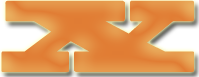
<style>
.page{position:relative;width:199px;height:77px}
.page>*{position:absolute;margin:0}
.t1{font:133.3px "BlackoakStd";color:#e38a40}
.t2{font:242.2px "BlackoakStd";color:#e38a40}
</style>
<div class="page">
<p class="t1" style="left:1px;top:0px;width:193px;height:72px"><span class="t2"> </span>x</p>
</div>
